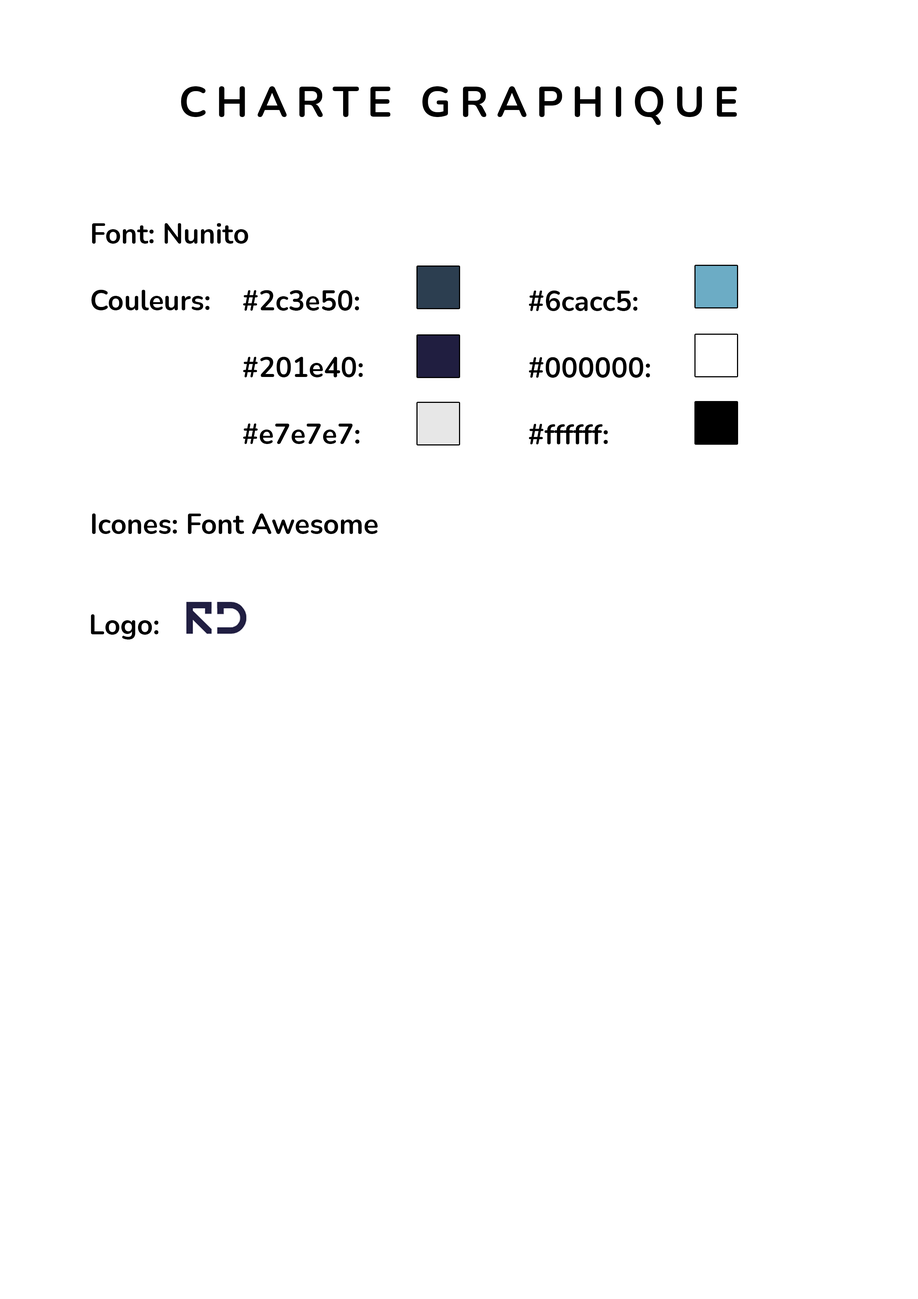
<style>
.page{position:relative;width:918px;height:1299px;background:#ffffff}
.page>*{position:absolute;margin:0}
.t1{font:41.9px "Nunito-Bold";letter-spacing:0.2em;color:#000000;text-transform:uppercase}
.t2{font:27.8px "Nunito-Bold";color:#000000}
</style>
<div class="page">
<p class="t1" style="left:181px;top:86px;width:556px;height:39px">Charte graphique</p>
<p class="t2" style="left:91px;top:223px;width:157px;height:87px">Font: Nunito<br><br>Couleurs:</p>
<p class="t2" style="left:243px;top:290px;width:120px;height:154px">#2c3e50:<br><br>#201e40: <br><br>#e7e7e7:</p>
<p class="t2" style="left:529px;top:290px;width:121px;height:154px">#6cacc5:<br><br>#000000:<br><br>#ffffff:</p>
<p class="t2" style="left:92px;top:513px;width:286px;height:21px">Icones: Font Awesome</p>
<p class="t2" style="left:91px;top:614px;width:67px;height:25px">Logo:</p>
</div>
